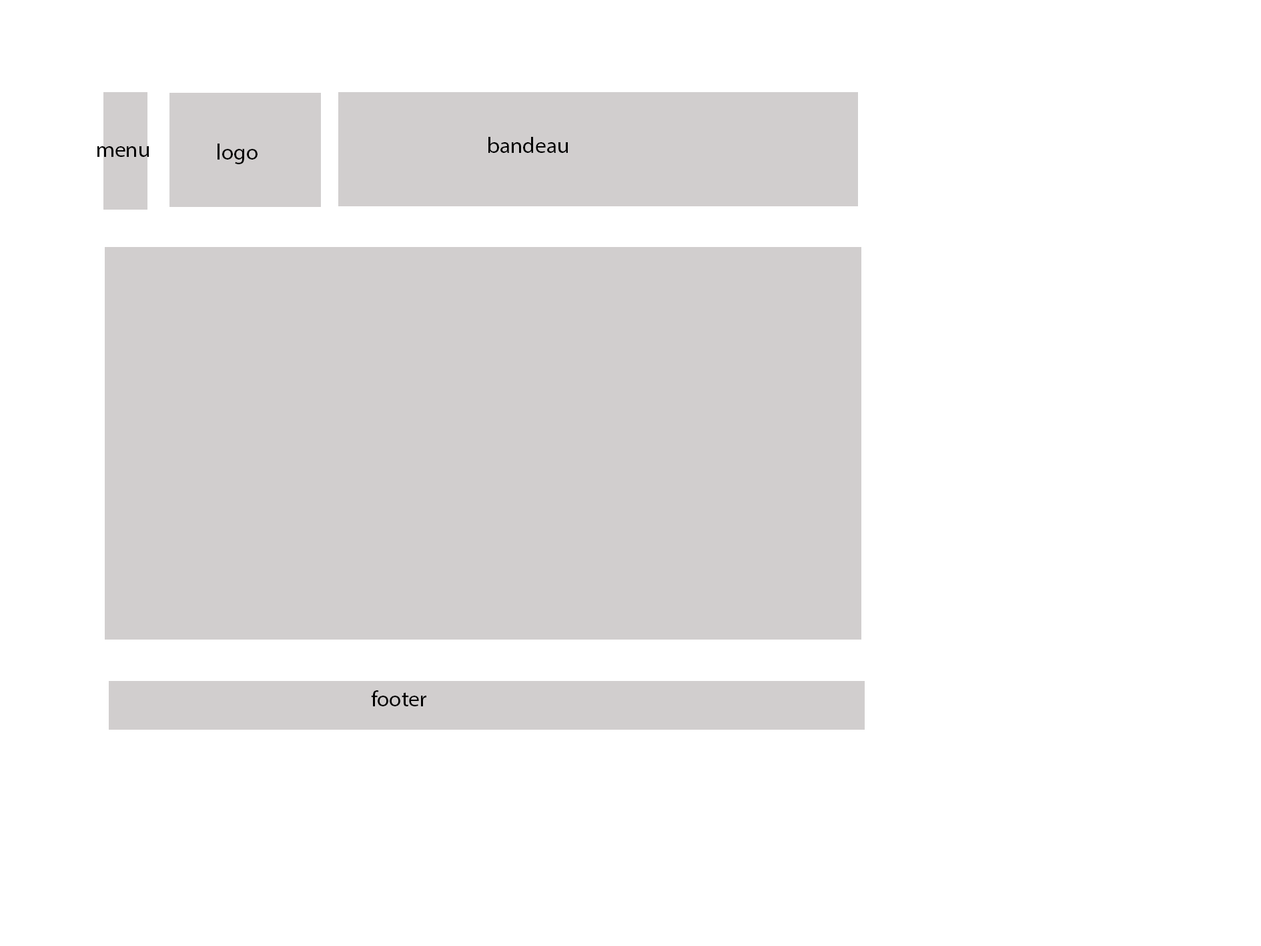
<style>
.page{position:relative;width:1261px;height:946px;background:#ffffff}
.page>*{position:absolute;margin:0}
.t1{font:22.2px "MyriadPro-Regular";color:#000000}
</style>
<div class="page">
<p class="t1" style="left:488px;top:137px;width:80px;height:16px">bandeau</p>
<p class="t1" style="left:97px;top:146px;width:52px;height:11px">menu</p>
<p class="t1" style="left:218px;top:143px;width:40px;height:21px">logo</p>
<p class="t1" style="left:371px;top:690px;width:55px;height:16px">footer</p>
</div>
